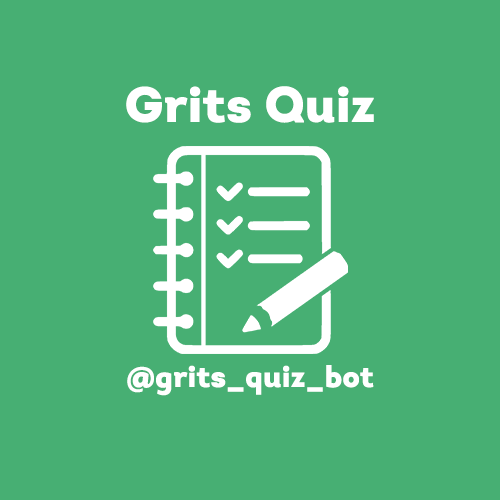
<style>
.page{position:relative;width:500px;height:500px;background:#47af73}
.page>*{position:absolute;margin:0}
.t1{font:50px "Intro-Black";color:#ffffff}
.t2{font:30px "Intro-Black";color:#ffffff}
</style>
<div class="page">
<p class="t1" style="left:126px;top:86px;width:248px;height:37px">Grits Quiz</p>
<p class="t2" style="left:127px;top:365px;width:247px;height:31px">@grits_quiz_bot</p>
</div>
